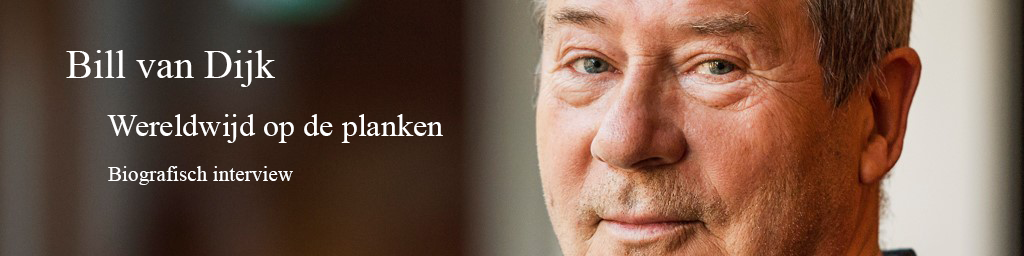
<style>
.page{position:relative;width:1024px;height:256px}
.page>*{position:absolute;margin:0}
.t1{font:40px "TimesNewRomanPSMT";color:#ffffff}
.t2{font:32px "TimesNewRomanPSMT";color:#ffffff}
.t3{font:21.3px "TimesNewRomanPSMT";color:#ffffff}
</style>
<div class="page">
<p class="t1" style="left:66px;top:50px;width:209px;height:37px">Bill van Dijk</p>
<p class="t2" style="left:107px;top:114px;width:336px;height:29px">Wereldwijd op de planken</p>
<p class="t3" style="left:108px;top:166px;width:185px;height:19px">Biografisch interview</p>
</div>
